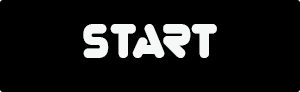
<style>
.page{position:relative;width:300px;height:92px;background:#000000}
.page>*{position:absolute;margin:0}
.t1{font:47.9px "Zorque-Regular";color:#f6f8f7}
</style>
<div class="page">
<p class="t1" style="left:83px;top:24px;width:134px;height:34px">Start</p>
</div>
